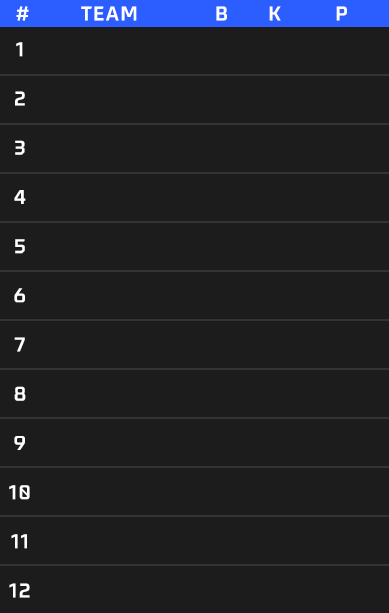
<style>
.page{position:relative;width:389px;height:613px;background:#1c1c1c}
.page>*{position:absolute;margin:0}
.t1{font:20px "GFF-Latin-Bold";letter-spacing:0.06em;color:#ffffff;text-transform:uppercase}
.t2{font:20px/49.2px "GFF-Latin-Bold";letter-spacing:0.06em;color:#ffffff;text-transform:uppercase}
</style>
<div class="page">
<p class="t1" style="left:16px;top:6px;width:13px;height:15px">#</p>
<p class="t1" style="left:81px;top:6px;width:56px;height:15px">TEAM</p>
<p class="t1" style="left:216px;top:6px;width:11px;height:15px">B</p>
<p class="t1" style="left:269px;top:6px;width:12px;height:15px">K</p>
<p class="t1" style="left:336px;top:6px;width:11px;height:15px">P</p>
<p class="t2" style="left:9px;top:42px;width:21px;height:556px;text-align:center">1<br>2<br>3<br>4<br>5<br>6<br>7<br>8<br>9<br>10<br>11<br>12</p>
</div>
